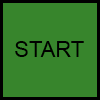
<style>
.page{position:relative;width:100px;height:100px;background:#37852c}
.page>*{position:absolute;margin:0}
.t1{font:21.9px "ArialMT";color:#000000}
</style>
<div class="page">
<p class="t1" style="left:15px;top:41px;width:69px;height:16px">START</p>
</div>
